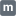
<style>
.page{position:relative;width:16px;height:16px;background:#616b75}
.page>*{position:absolute;margin:0}
.t1{font:11.7px "Helvetica-Bold";color:#ffffff}
</style>
<div class="page">
<p class="t1" style="left:3px;top:4px;width:10px;height:7px">m</p>
</div>
